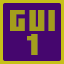
<style>
.page{position:relative;width:64px;height:64px;background:#45066e}
.page>*{position:absolute;margin:0}
.t1{font:30px/24px "MinecraftTen";letter-spacing:0.05em;color:#a39e1c}
</style>
<div class="page">
<p class="t1" style="left:10px;top:10px;width:45px;height:45px;text-align:center">gui<br>1</p>
</div>
